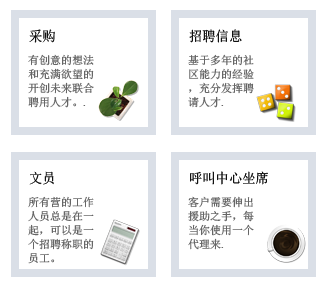
<style>
.page{position:relative;width:327px;height:284px;background:#ffffff}
.page>*{position:absolute;margin:0}
.t1{font:14px "SimSun";color:#000000;scale:0.95 1}
.t2{font:11px/14px "SimSun";color:#666666}
</style>
<div class="page">
<p class="t1" style="left:29px;top:29px;width:26px;height:14px">采购</p>
<p class="t1" style="left:189px;top:29px;width:53px;height:14px">招聘信息</p>
<p class="t2" style="left:28px;top:54px;width:66px;height:54px">有创意的想法<br>和充满欲望的<br>开创未来联合<br>聘用人才。.</p>
<p class="t2" style="left:188px;top:54px;width:66px;height:54px">基于多年的社<br>区能力的经验<br>，充分发挥聘<br>请人才.</p>
<p class="t1" style="left:29px;top:171px;width:25px;height:14px">文员</p>
<p class="t1" style="left:190px;top:171px;width:78px;height:14px">呼叫中心坐席</p>
<p class="t2" style="left:28px;top:196px;width:66px;height:68px">所有营的工作<br>人员总是在一<br>起，可以是一<br>个招聘称职的<br>员工。</p>
<p class="t2" style="left:188px;top:196px;width:66px;height:54px">客户需要伸出<br>援助之手，每<br>当你使用一个<br>代理来.</p>
</div>
